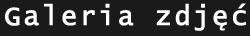
<style>
.page{position:relative;width:250px;height:36px;background:#1a1a1a}
.page>*{position:absolute;margin:0}
.t1{font:26.7px "LucidaConsole";letter-spacing:0.075em;color:#ffffff;font-weight:bold}
</style>
<div class="page">
<p class="t1" style="left:5px;top:3px;width:241px;height:28px">Galeria zdjęć</p>
</div>
